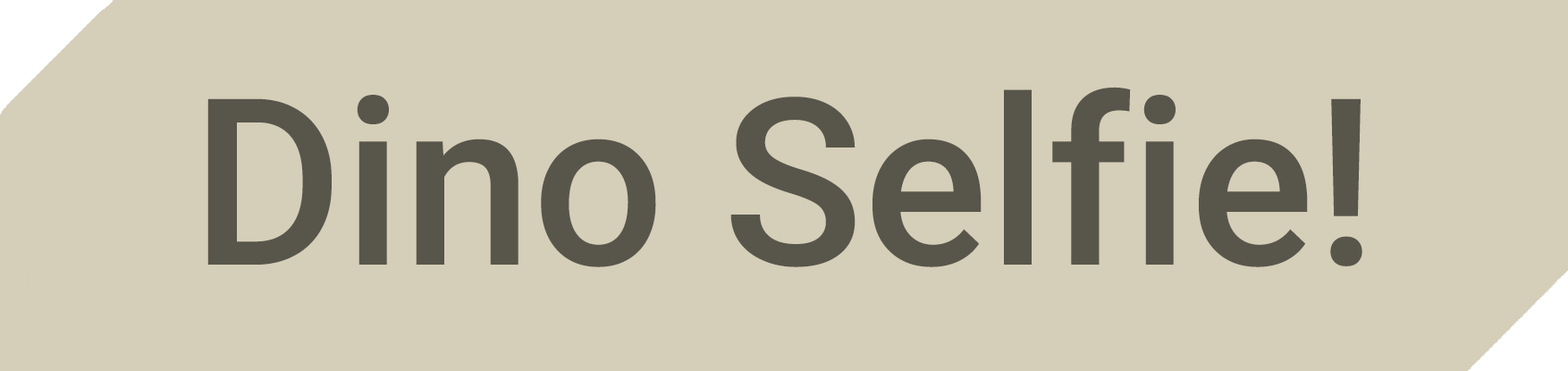
<style>
.page{position:relative;width:1568px;height:371px;background:#d5ceb8}
.page>*{position:absolute;margin:0}
.t1{font:232.8px "Roboto-Medium";color:#58564b}
</style>
<div class="page">
<p class="t1" style="left:207px;top:87px;width:1155px;height:180px">Dino Selfie!</p>
</div>
